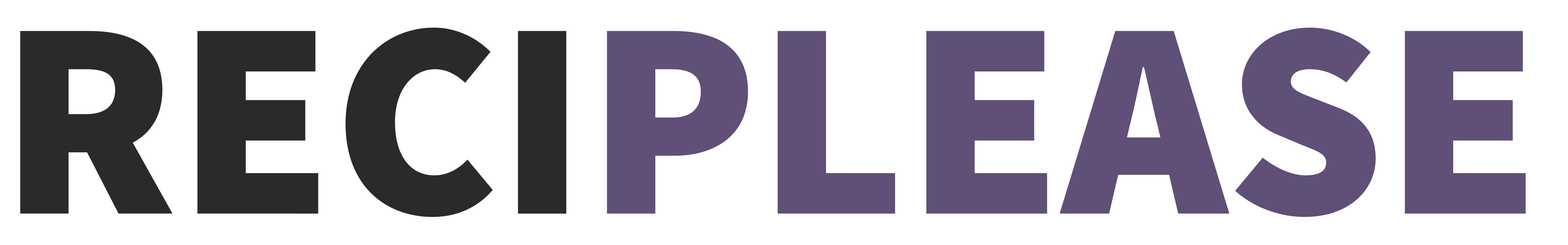
<style>
.page{position:relative;width:1568px;height:245px;background:#ffffff}
.page>*{position:absolute;margin:0}
.t1{font:101.1px/209.2px "SourceSansRoman-Black";color:#604f77}
.t2{font:101.1px/209.2px "SourceSansRoman-Black";color:#2a2a2a}
</style>
<div class="page">
<p class="t1" style="left:20px;top:27px;width:1506px;height:190px;text-align:center"><span class="t2">RECI</span>PLEASE</p>
</div>
